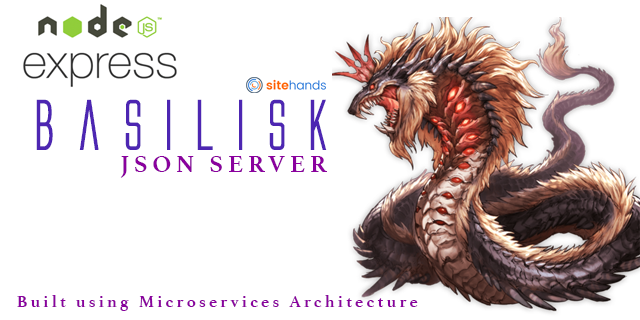
<style>
.page{position:relative;width:640px;height:320px;background:#ffffff}
.page>*{position:absolute;margin:0}
.t1{font:66.7px "AlienLeagueBold";letter-spacing:0.2em;color:#4d26b2}
.t2{font:25px "Athelas-Bold";letter-spacing:0.2em;color:#8a019e}
.t3{font:16.7px "Athelas-Bold";letter-spacing:0.2em;color:#8a019e}
</style>
<div class="page">
<p class="t1" style="left:36px;top:99px;width:291px;height:51px">Basilisk</p>
<p class="t2" style="left:120px;top:156px;width:207px;height:22px">JSON SERVER</p>
<p class="t3" style="left:17px;top:295px;width:401px;height:16px">Built using Microservices Architecture</p>
</div>
